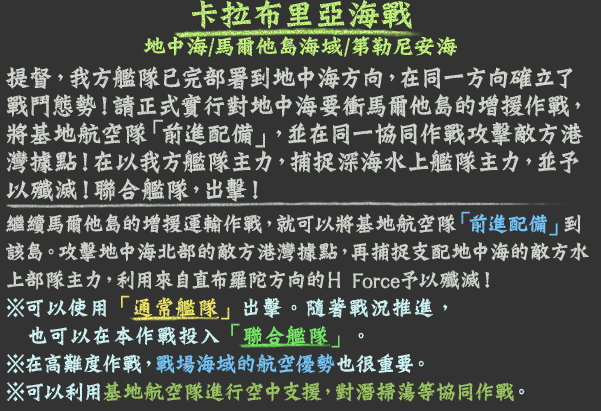
<style>
.page{position:relative;width:601px;height:411px;background:#333333}
.page>*{position:absolute;margin:0}
.t1{font:24px/38px "DFLungMen-W9-WINP-BF";color:#bcec77}
.t2{font:36px/38px "DFLungMen-W9-WINP-BF";color:#bcec77}
.t3{font:28px/28px "DFLungMen-W9-WINP-BF";color:#d9ded6;scale:0.9 1}
.t4{font:28px/36px "DFLungMen-W9-WINP-BF";color:#d9ded6;scale:0.9 1}
.t5{font:24px/28px "DFLungMen-W9-WINP-BF";color:#d9ded6;scale:0.9 1}
.t6{font:24px/28px "DFLungMen-W9-WINP-BF";color:#78cbff;scale:0.9 1}
.t7{font:24px/28px "DFLungMen-W9-WINP-BF";color:#d7feff;scale:0.9 1}
.t8{font:24px/28px "DFLungMen-W9-WINP-BF";color:#f5ed68;scale:0.9 1}
.t9{font:24px/28px "DFLungMen-W9-WINP-BF";color:#7bf26b;scale:0.9 1}
.t10{font:24px/28px "DFLungMen-W9-WINP-BF";color:#a0cc65;scale:0.9 1}
</style>
<div class="page">
<p class="t1" style="left:143px;top:0px;width:314px;height:57px;text-align:center"><span class="t2">卡拉布里亞海戰<br></span>地中海/馬爾他島海域/第勒尼安海</p>
<p class="t3" style="left:5px;top:65px;width:584px;height:337px">提督，我方艦隊已完部署到地中海方向，在同一方向確立了<br>戰鬥態勢！請正式實行對地中海要衝馬爾他島的增援作戰，<br>將基地航空隊「前進配備」，並在同一協同作戰攻擊敵方港<br>灣據點！在以我方艦隊主力，捕捉深海水上艦隊主力，並予<br><span class="t4">以殲滅！聯合艦隊，出擊！<br></span><span class="t5">繼續馬爾他島的增援運輸作戰，就可以將基地航空隊</span><span class="t6">「前進配備」</span><span class="t5">到<br>該島。攻擊地中海北部的敵方港灣據點，再捕捉支配地中海的敵方水<br>上部隊主力，利用來自直布羅陀方向的Ｈ Force予以殲滅！<br></span><span class="t7">※可以使用</span><span class="t8">「通常艦隊」</span><span class="t7">出擊。隨著戰況推進，<br>　也可以在本作戰投入</span><span class="t9">「聯合艦隊」</span><span class="t7">。<br>※在高難度作戰，</span><span class="t6">戰場海域的航空優勢</span><span class="t7">也很重要。<br>※可以利用</span><span class="t10">基地航空隊進行空中支援，對潛掃蕩等協同作戰</span><span class="t7">。</span></p>
</div>
